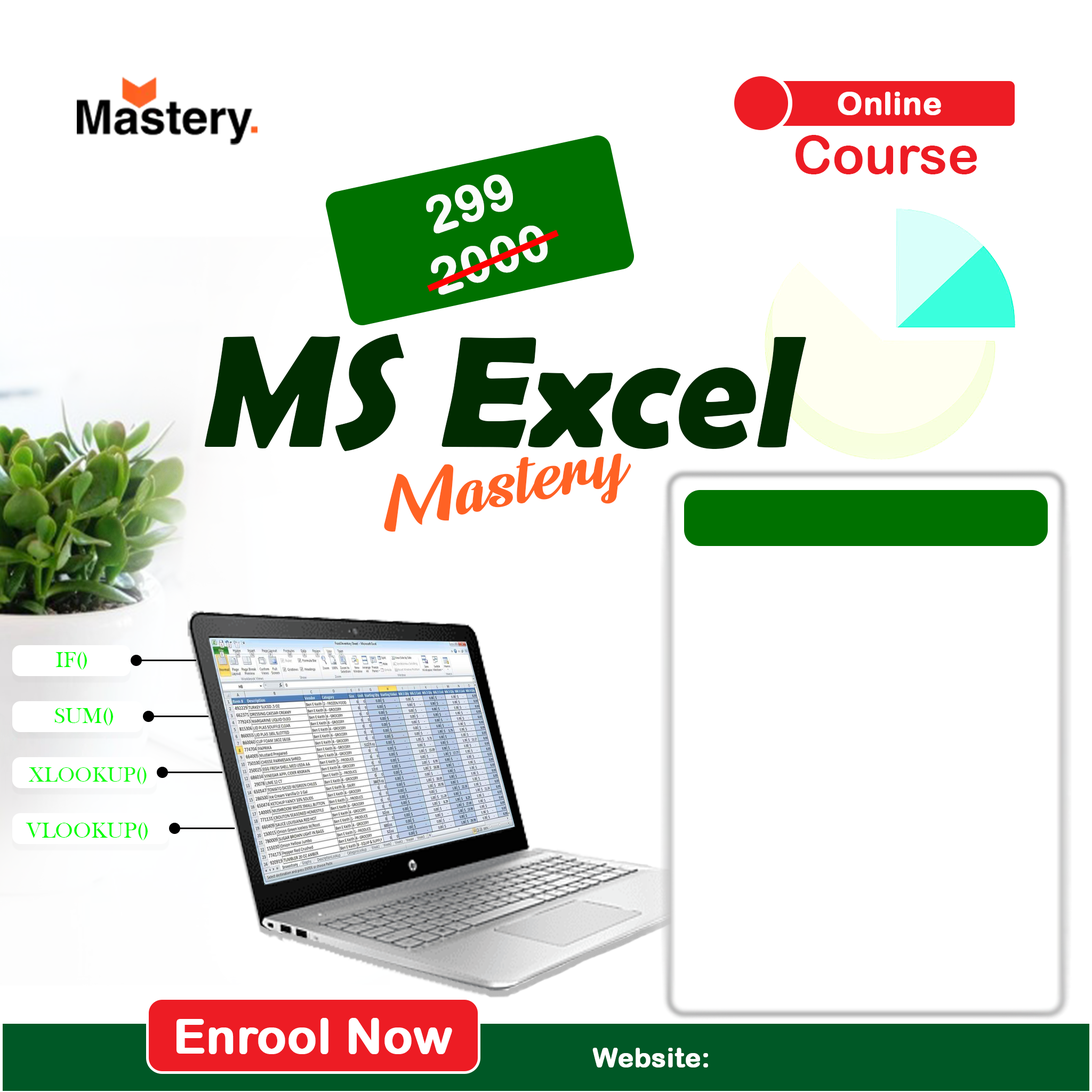
<style>
.page{position:relative;width:1092px;height:1092px;background:#ffffff}
.page>*{position:absolute;margin:0}
.t1{font:32px "ArialRoundedMTBold";color:#ffffff;font-weight:bold}
.t2{font:53.3px "ArialRoundedMTBold";color:#ed1c24}
.t3{font:49.6px "ArialRoundedMTBold";color:#fbfbfb;font-weight:bold}
.t4{font:160px "BerlinSansFBDemi-Bold";color:#012b01;font-style:italic}
.t5{font:106.6px "LemonJellyPersonalUse";color:#ff6224}
.t6{font:22.3px "BaskOldFace";color:#05ff05}
.t7{font:22.3px "BaskOldFace";color:#05fd05}
.t8{font:21.3px "BaskOldFace";color:#18fd18}
.t9{font:48px "ArialRoundedMTBold";color:#ffffff;font-weight:bold}
.t10{font:26.7px "ArialRoundedMTBold";color:#ffffff;font-weight:bold}
</style>
<div class="page">
<p class="t1" style="left:838px;top:92px;width:103px;height:23px">Online</p>
<p class="t2" style="left:796px;top:135px;width:181px;height:39px">Course</p>
<p class="t3" style="left:426px;top:174px;width:122px;height:121px;text-align:center;rotate:-19deg">299<br>2000</p>
<p class="t4" style="left:205px;top:334px;width:601px;height:117px">MS Excel</p>
<p class="t5" style="left:384px;top:453px;width:247px;height:79px;rotate:-11deg">Mastery</p>
<p class="t6" style="left:55px;top:652px;width:32px;height:18px">IF()</p>
<p class="t7" style="left:54px;top:708px;width:59px;height:18px">SUM()</p>
<p class="t8" style="left:29px;top:767px;width:118px;height:17px">XLOOKUP()</p>
<p class="t7" style="left:26px;top:822px;width:122px;height:18px">VLOOKUP()</p>
<p class="t9" style="left:176px;top:1018px;width:276px;height:36px">Enrool Now</p>
<p class="t10" style="left:592px;top:1048px;width:116px;height:19px">Website:</p>
</div>
